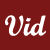
<style>
.page{position:relative;width:50px;height:50px;background:#7b1717}
.page>*{position:absolute;margin:0}
.t1{font:28.6px "ScriptMTBold";color:#ffffff}
</style>
<div class="page">
<p class="t1" style="left:5px;top:15px;width:41px;height:21px">Vid</p>
</div>
